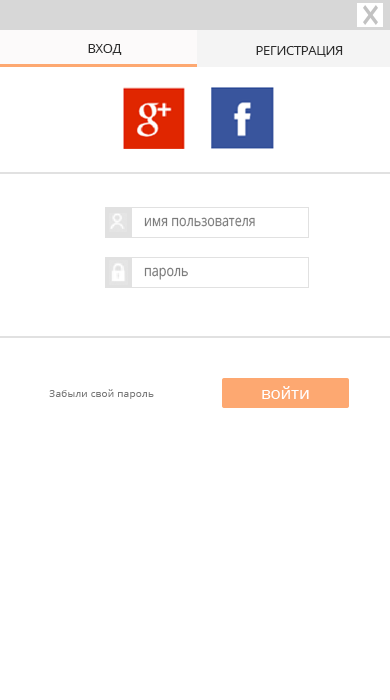
<style>
.page{position:relative;width:390px;height:700px;background:#ffffff}
.page>*{position:absolute;margin:0}
.t1{font:12.5px "OpenSans-Regular";color:#2c2c2c}
.t2{font:14.9px "OpenSans-Regular";color:#7b7b7b;scale:0.84 1}
.t3{font:10.4px "OpenSans-Regular";color:#7b7b7b}
.t4{font:16.7px "OpenSans-Regular";color:#ffffff}
</style>
<div class="page">
<p class="t1" style="left:88px;top:44px;width:34px;height:11px">ВХОД</p>
<p class="t1" style="left:256px;top:46px;width:87px;height:11px">РЕГИСТРАЦИЯ</p>
<p class="t2" style="left:144px;top:217px;width:111px;height:10px">имя пользователя</p>
<p class="t2" style="left:144px;top:267px;width:44px;height:13px">пароль</p>
<p class="t3" style="left:49px;top:389px;width:105px;height:10px">Забыли свой пароль</p>
<p class="t4" style="left:262px;top:386px;width:47px;height:13px">войти</p>
</div>
